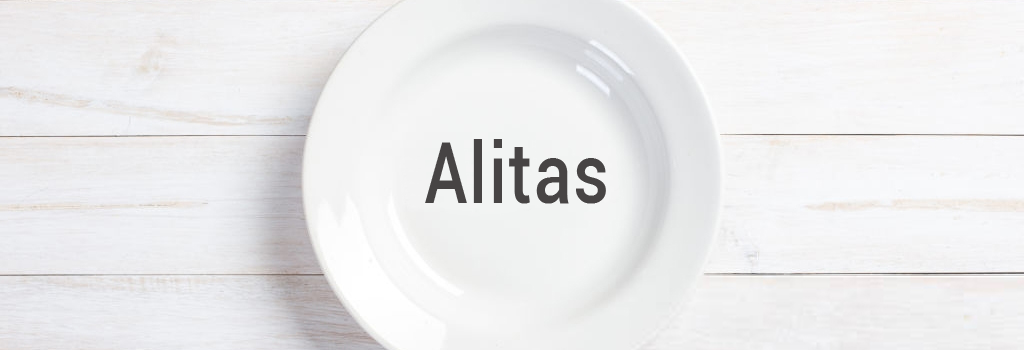
<style>
.page{position:relative;width:1024px;height:350px}
.page>*{position:absolute;margin:0}
.t1{font:85.3px "Roboto-Medium";letter-spacing:0.025em;color:#474444;scale:0.8 1}
</style>
<div class="page">
<p class="t1" style="left:425px;top:139px;width:181px;height:65px">Alitas</p>
</div>
